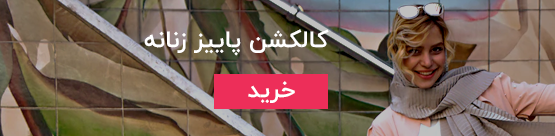
<style>
.page{position:relative;width:555px;height:136px}
.page>*{position:absolute;margin:0}
.t1{font:24px "IRANYekan-Bold";color:#ffffff}
</style>
<div class="page">
<p class="t1" style="left:144px;top:29px;width:185px;height:27px">کالکشن پاییز زنانه</p>
<p class="t1" style="left:248px;top:81px;width:47px;height:22px">خرید</p>
</div>
